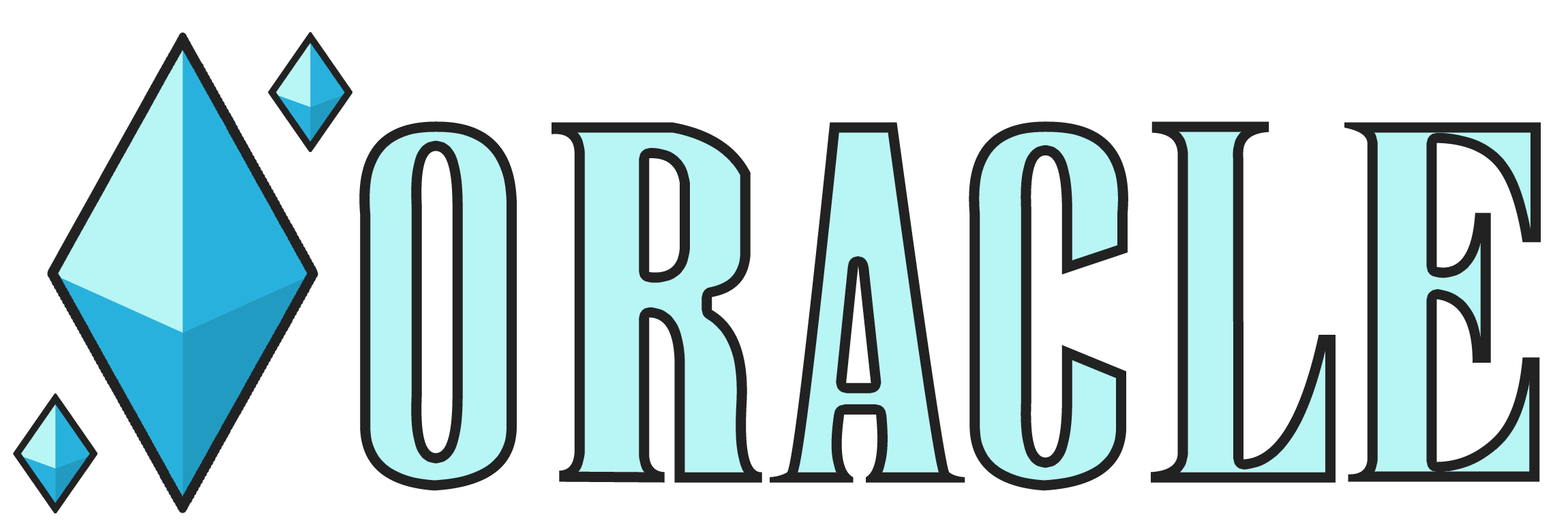
<style>
.page{position:relative;width:1568px;height:525px;background:#ffffff}
.page>*{position:absolute;margin:0}
.t1{font:373.8px "New";color:#b8f5f5;scale:1.76 1}
.t2{font:373.8px "New";scale:1.76 1}
</style>
<div class="page">
<p class="t1" style="left:359px;top:121px;width:158px;height:370px">O</p>
<p class="t1" style="left:552px;top:122px;width:210px;height:361px">R</p>
<p class="t1" style="left:770px;top:122px;width:195px;height:361px">A</p>
<p class="t1" style="left:969px;top:121px;width:159px;height:370px">C</p>
<p class="t2" style="left:1151px;top:121px;width:185px;height:362px">L</p>
<p class="t2" style="left:1344px;top:122px;width:197px;height:360px">E</p>
</div>
